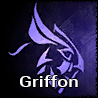
<style>
.page{position:relative;width:98px;height:98px}
.page>*{position:absolute;margin:0}
.t1{font:16px "Roboto-Medium";color:#ffffff;scale:1.2 1}
</style>
<div class="page">
<p class="t1" style="left:20px;top:75px;width:58px;height:12px">Griffon</p>
</div>
